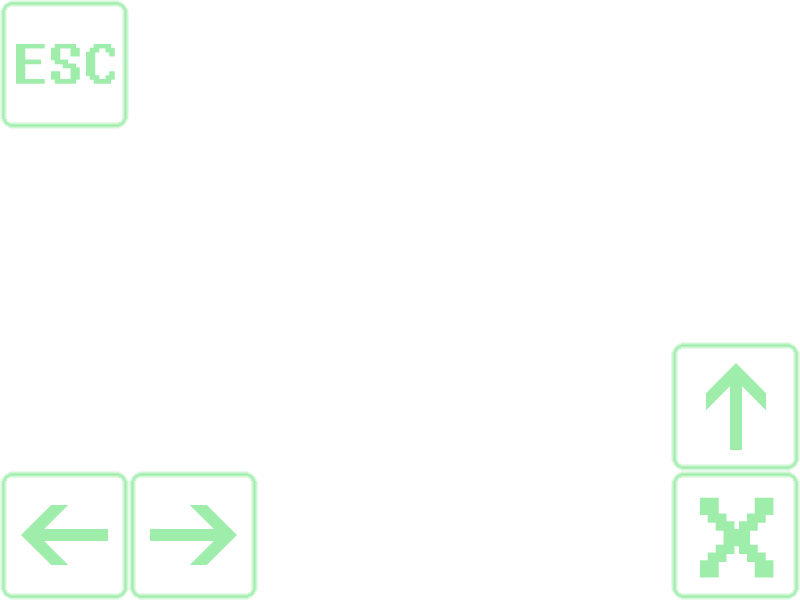
<style>
.page{position:relative;width:800px;height:600px;background:#ffffff}
.page>*{position:absolute;margin:0}
.t1{font:50px "System";color:#9fedab;font-weight:bold}
.t2{font:100px "System";color:#9fedab;font-weight:bold}
</style>
<div class="page">
<p class="t1" style="left:16px;top:44px;width:99px;height:40px">ESC</p>
<p class="t2" style="left:700px;top:497px;width:74px;height:81px">X</p>
</div>
